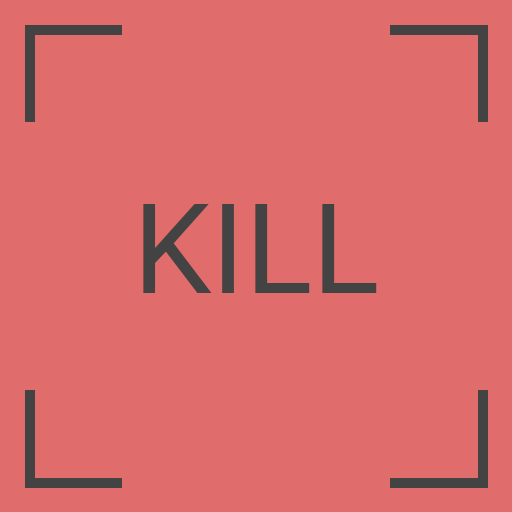
<style>
.page{position:relative;width:512px;height:512px;background:#e06c6c}
.page>*{position:absolute;margin:0}
.t1{font:125px "Roboto-Regular";color:#434343}
</style>
<div class="page">
<p class="t1" style="left:143px;top:204px;width:234px;height:89px">KILL</p>
</div>
